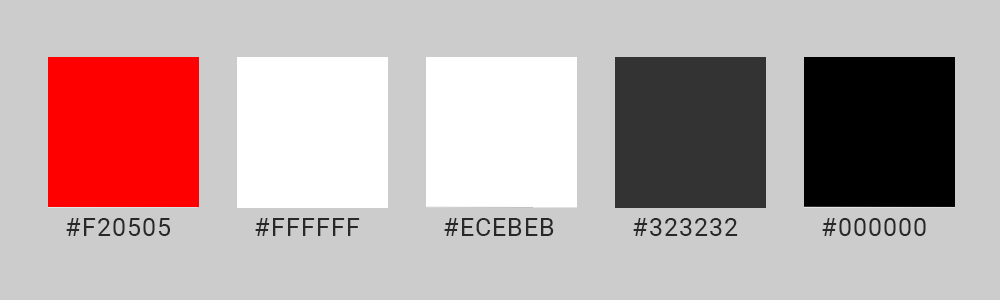
<style>
.page{position:relative;width:1000px;height:300px;background:#cccccc}
.page>*{position:absolute;margin:0}
.t1{font:25.3px "Roboto-Regular";letter-spacing:0.04em;color:#282828}
</style>
<div class="page">
<p class="t1" style="left:66px;top:218px;width:104px;height:18px">#F20505</p>
<p class="t1" style="left:255px;top:218px;width:105px;height:18px">#FFFFFF</p>
<p class="t1" style="left:444px;top:218px;width:110px;height:18px">#ECEBEB</p>
<p class="t1" style="left:633px;top:218px;width:105px;height:18px">#323232</p>
<p class="t1" style="left:822px;top:218px;width:104px;height:18px">#000000</p>
</div>
